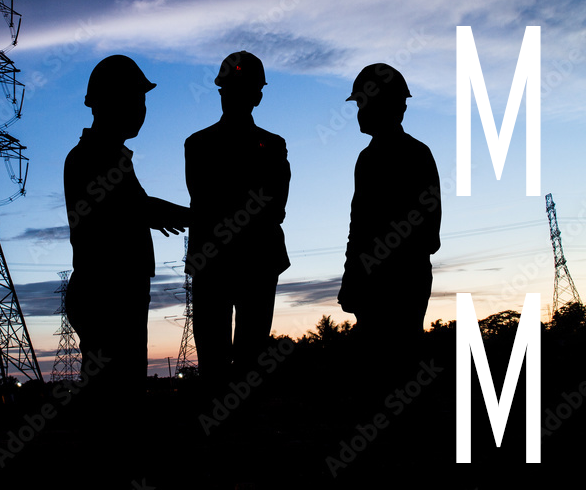
<style>
.page{position:relative;width:586px;height:490px;background:#000000}
.page>*{position:absolute;margin:0}
.t1{font:222.2px "AgencyFB-Reg";color:#ffffff}
</style>
<div class="page">
<p class="t1" style="left:456px;top:26px;width:85px;height:437px">M<br>M</p>
</div>
